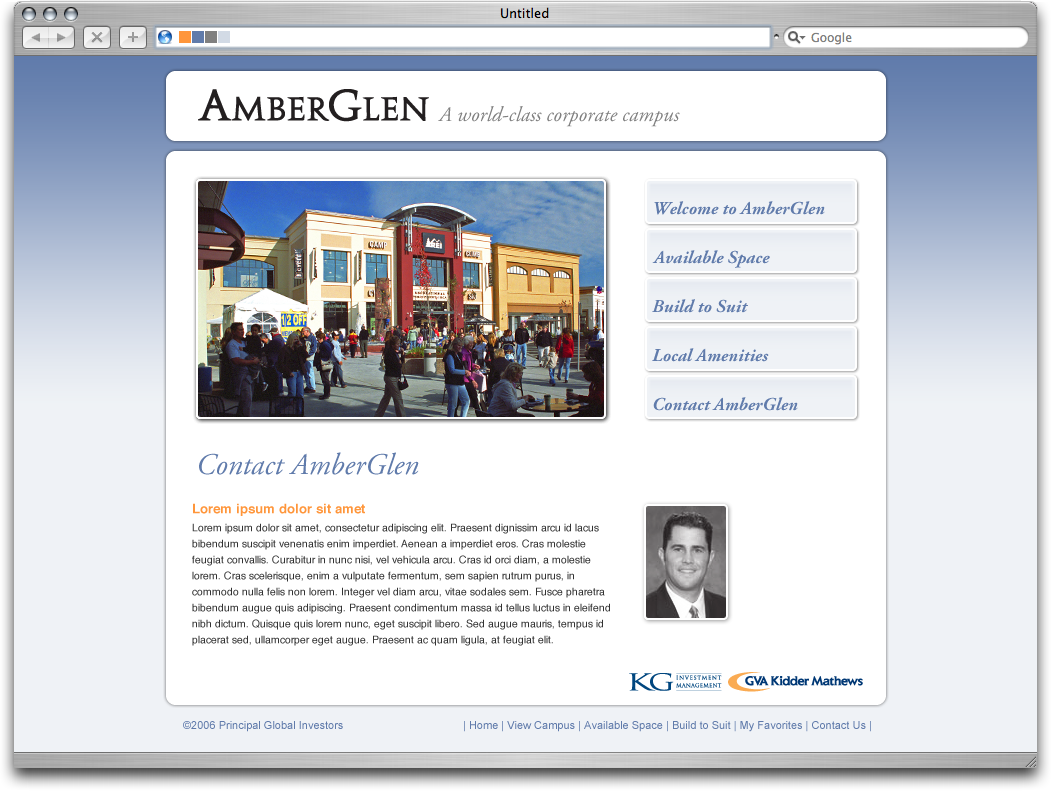
<style>
.page{position:relative;width:1051px;height:791px;background:#ffffff}
.page>*{position:absolute;margin:0}
.t1{font:30px "AGaramondPro-Italic";color:#607bab}
.t2{font:10.5px/16px "Helvetica";color:#333333}
.t3{font:13px/16px "Helvetica-Bold";color:#ff963b}
.t4{font:11px "ArialMT";color:#607bab}
</style>
<div class="page">
<p class="t1" style="left:199px;top:452px;width:220px;height:23px">Contact AmberGlen</p>
<p class="t2" style="left:192px;top:503px;width:418px;height:143px"><span class="t3">Lorem ipsum dolor sit amet<br></span>Lorem ipsum dolor sit amet, consectetur adipiscing elit. Praesent dignissim arcu id lacus bibendum suscipit venenatis enim imperdiet. Aenean a imperdiet eros. Cras molestie feugiat convallis. Curabitur in nunc nisi, vel vehicula arcu. Cras id orci diam, a molestie lorem. Cras scelerisque, enim a vulputate fermentum, sem sapien rutrum purus, in commodo nulla felis non lorem. Integer vel diam arcu, vitae sodales sem. Fusce pharetra bibendum augue quis adipiscing. Praesent condimentum massa id tellus luctus in eleifend nibh dictum. Quisque quis lorem nunc, eget suscipit libero. Sed augue mauris, tempus id placerat sed, ullamcorper eget augue. Praesent ac quam ligula, at feugiat elit.</p>
<p class="t4" style="left:183px;top:721px;width:160px;height:11px">©2006 Principal Global Investors</p>
<p class="t4" style="left:464px;top:721px;width:407px;height:11px">| Home | View Campus | Available Space | Build to Suit | My Favorites | Contact Us |</p>
</div>
